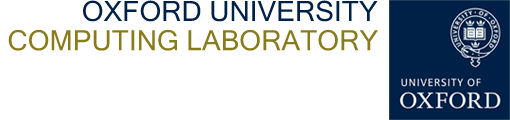
<style>
.page{position:relative;width:510px;height:120px;background:#ffffff}
.page>*{position:absolute;margin:0}
.t1{font:28px "MicrosoftSansSerif";color:#002147}
.t2{font:28px "MicrosoftSansSerif";color:#887b1b}
</style>
<div class="page">
<p class="t1" style="left:83px;top:0px;width:295px;height:22px">OXFORD UNIVERSITY</p>
<p class="t2" style="left:8px;top:29px;width:370px;height:22px">COMPUTING LABORATORY</p>
</div>
